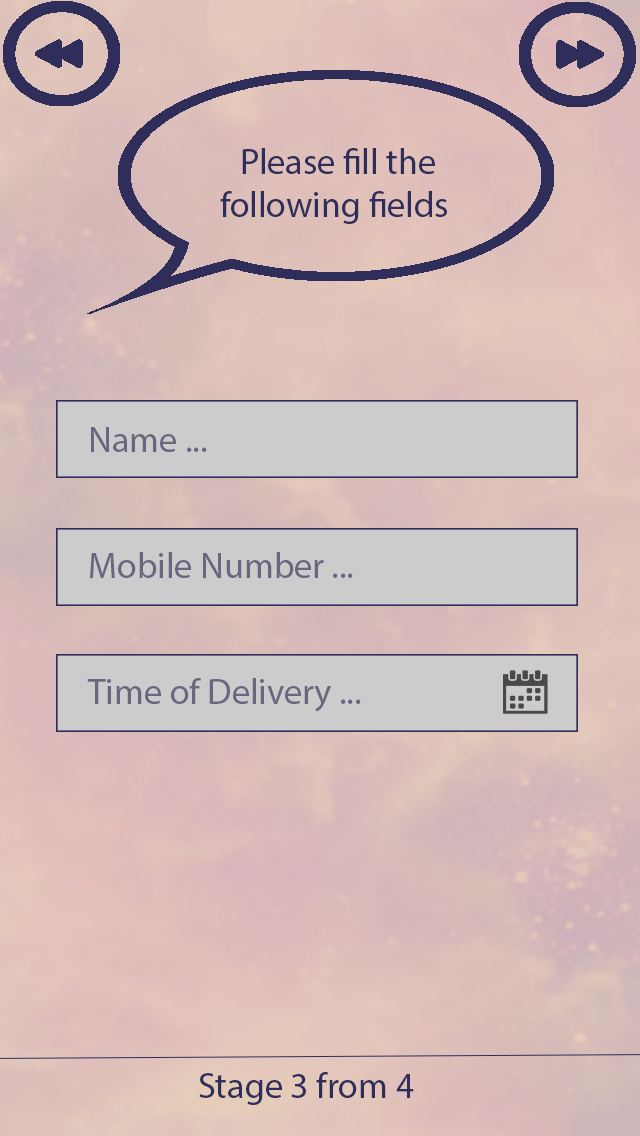
<style>
.page{position:relative;width:640px;height:1136px}
.page>*{position:absolute;margin:0}
.t1{font:36px "MyriadPro-Regular";color:#2f2e5a}
.t2{font:36px "MyriadPro-Regular";color:#67677f}
</style>
<div class="page">
<p class="t1" style="left:220px;top:148px;width:227px;height:76px;text-align:center">Please fill the <br>following fields</p>
<p class="t2" style="left:91px;top:427px;width:116px;height:25px">... Name</p>
<p class="t2" style="left:90px;top:552px;width:263px;height:26px">... Mobile Number</p>
<p class="t2" style="left:87px;top:678px;width:274px;height:34px">... Time of Delivery</p>
<p class="t1" style="left:199px;top:1072px;width:215px;height:33px">4 from 3 Stage</p>
</div>
